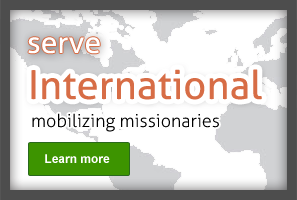
<style>
.page{position:relative;width:297px;height:200px;background:#ffffff}
.page>*{position:absolute;margin:0}
.t1{font:30px "Aller";color:#ffffff}
.t2{font:40px "Aller";color:#d76d46}
.t3{font:18px "Aller-Light";color:#000000}
.t4{font:12px "Arial-BoldMT";color:#ffffff}
</style>
<div class="page">
<p class="t1" style="left:28px;top:37px;width:72px;height:17px">serve</p>
<p class="t2" style="left:31px;top:69px;width:231px;height:31px">International</p>
<p class="t3" style="left:32px;top:113px;width:187px;height:19px">mobilizing missionaries</p>
<p class="t4" style="left:45px;top:154px;width:65px;height:9px">Learn more</p>
</div>
